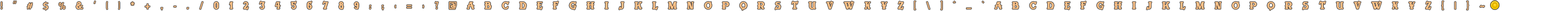
<style>
.page{position:relative;width:1568px;height:11px;background:#ffffff}
.page>*{position:absolute;margin:0}
.t1{font:12.3px "Wanderlust";letter-spacing:0.1em;color:#ffc48b;text-transform:uppercase}
</style>
<div class="page">
<p class="t1" style="left:1px;top:1px;width:1484px;height:9px">!  "  #  $  %  &amp;  '  (  )  *  +  ,  -  .  /  0  1  2  3  4  5  6  7  8  9  :  ;  &lt;  =  &gt;  ?  @  A  B  C  D  E  F  G  H  I  J  K  L  M  N  O  P  Q  R  S  T  U  V  W  X  Y  Z  [  \  ]  ^  _  `  a  b  c  d  e  f  g  h  i  j  k  l  m  n  o  p  q  r  s  t  u  v  w  x  y  z  {  |  }  ~</p>
</div>
